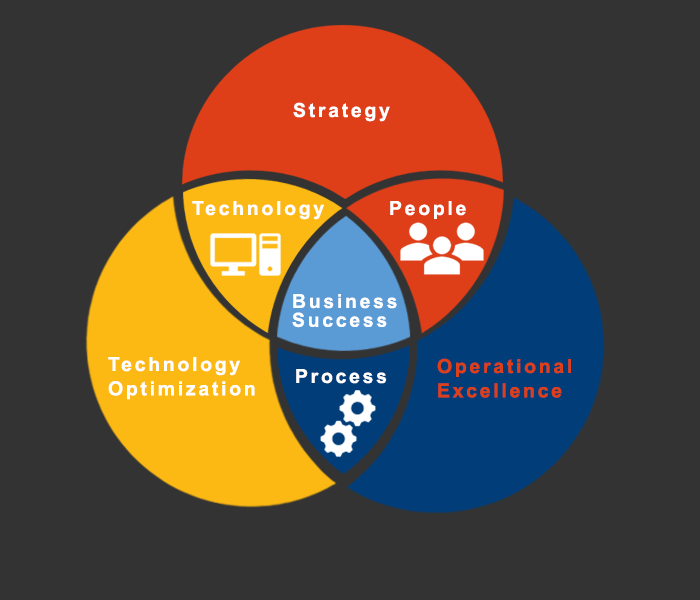
<style>
.page{position:relative;width:700px;height:600px;background:#333333}
.page>*{position:absolute;margin:0}
.t1{font:19.4px "Arial-BoldMT";letter-spacing:0.14em;color:#ffffff}
.t2{font:19.4px/7.7px "Arial-BoldMT";letter-spacing:0.14em;color:#ffffff}
.t3{font:19.4px/18.8px "Arial-BoldMT";letter-spacing:0.14em;color:#ffffff}
.t4{font:19.4px/24.3px "Arial-BoldMT";letter-spacing:0.14em;color:#ffffff}
.t5{font:19.4px/24.3px "Arial-BoldMT";letter-spacing:0.14em;color:#de3f18}
</style>
<div class="page">
<p class="t1" style="left:293px;top:102px;width:97px;height:20px">Strategy</p>
<p class="t1" style="left:192px;top:201px;width:132px;height:19px">Technology</p>
<p class="t1" style="left:390px;top:201px;width:76px;height:18px">People</p>
<p class="t2" style="left:292px;top:294px;width:105px;height:34px">Business<br><span class="t3">Success</span></p>
<p class="t4" style="left:108px;top:357px;width:147px;height:43px">Technology<br>Optimization</p>
<p class="t5" style="left:437px;top:358px;width:134px;height:40px">Operational<br>Excellence</p>
<p class="t1" style="left:296px;top:369px;width:91px;height:15px">Process</p>
</div>
